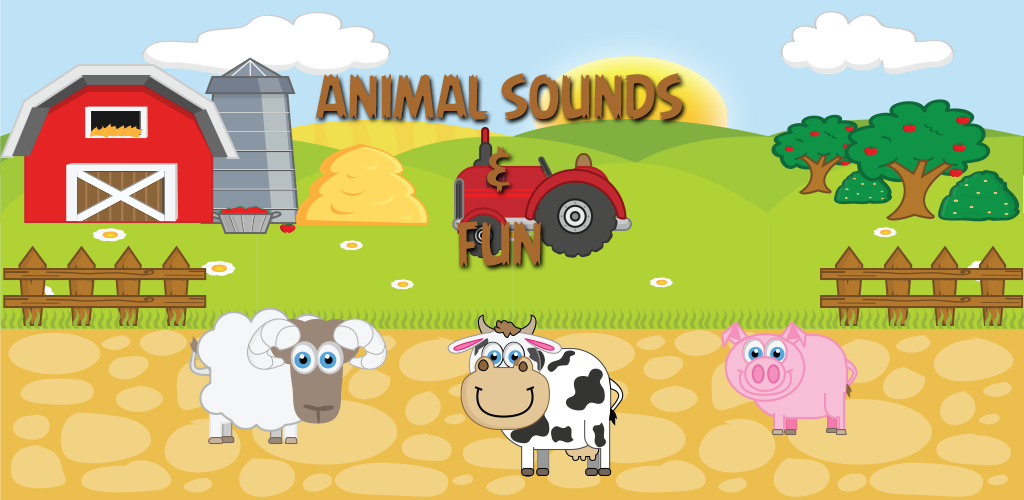
<style>
.page{position:relative;width:1024px;height:500px}
.page>*{position:absolute;margin:0}
.t1{font:55.7px/73.5px "AngryBirds-Regular";color:#a66a31;text-transform:uppercase}
</style>
<div class="page">
<p class="t1" style="left:315px;top:73px;width:367px;height:194px;text-align:center">Animal sounds<br>&amp;<br>fun</p>
</div>
